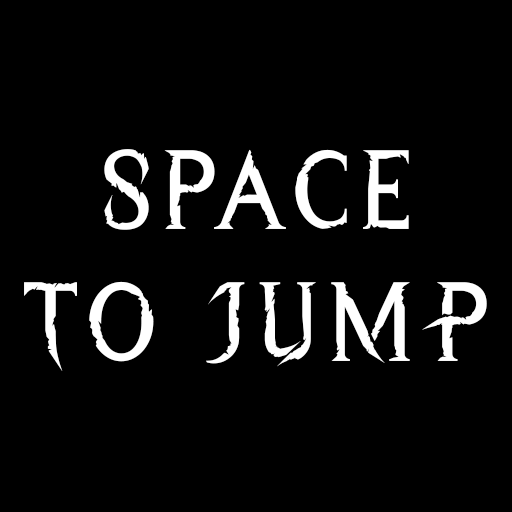
<style>
.page{position:relative;width:512px;height:512px;background:#000000}
.page>*{position:absolute;margin:0}
.t1{font:110.8px "WreckedShipRegular";letter-spacing:0.05em;color:#ffffff}
</style>
<div class="page">
<p class="t1" style="left:24px;top:149px;width:463px;height:222px;text-align:center">Space<br>To JUMP</p>
</div>
